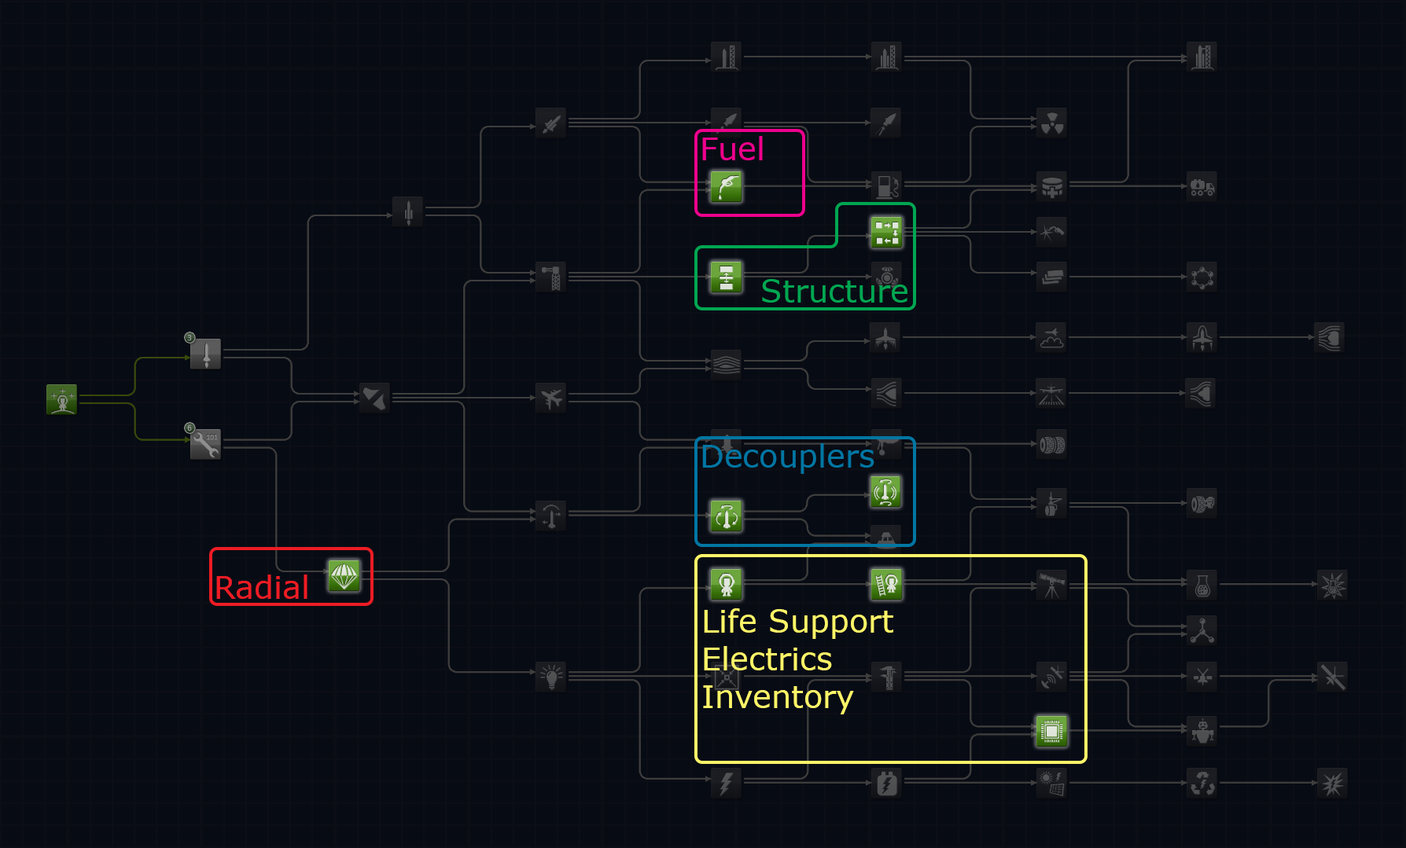
<style>
.page{position:relative;width:1406px;height:848px;background:#070b14}
.page>*{position:absolute;margin:0}
.t1{font:31.4px "Verdana";color:#ec008c}
.t2{font:31.4px "Verdana";color:#00a651}
.t3{font:31.4px "Verdana";color:#0076a3}
.t4{font:31.4px "Verdana";color:#ed1c24}
.t5{font:31.4px "Verdana";color:#fff568}
</style>
<div class="page">
<p class="t1" style="left:702px;top:136px;width:61px;height:24px">Fuel</p>
<p class="t2" style="left:762px;top:279px;width:145px;height:24px">Structure</p>
<p class="t3" style="left:702px;top:443px;width:172px;height:31px">Decouplers</p>
<p class="t4" style="left:216px;top:575px;width:91px;height:24px">Radial</p>
<p class="t5" style="left:703px;top:609px;width:190px;height:106px">Life Support<br>Electrics<br>Inventory</p>
</div>
